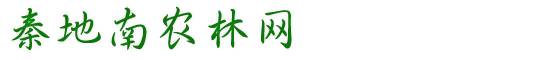
<style>
.page{position:relative;width:550px;height:60px;background:#ffffff}
.page>*{position:absolute;margin:0}
.t1{font:48px "GBHerSin-Medium";color:#0e750c;text-transform:uppercase;font-weight:bold}
</style>
<div class="page">
<p class="t1" style="left:11px;top:6px;width:281px;height:45px">秦地南农林网</p>
</div>
